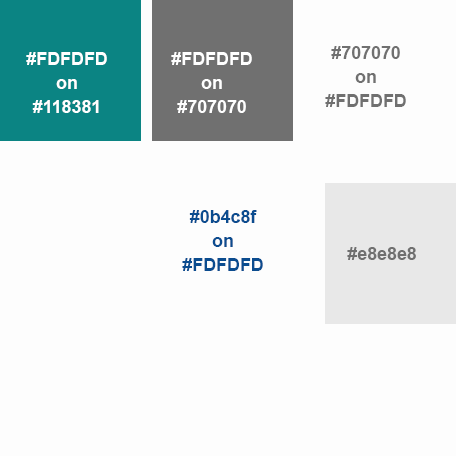
<style>
.page{position:relative;width:456px;height:456px;background:#fdfdfd}
.page>*{position:absolute;margin:0}
.t1{font:18px/24px "Arial-BoldMT";letter-spacing:-0.005em;color:#ffffff}
.t2{font:18px/24px "Arial-BoldMT";letter-spacing:-0.005em;color:#707070}
.t3{font:18px/24px "Arial-BoldMT";letter-spacing:-0.005em;color:#0b4c8f}
.t4{font:18px "Arial-BoldMT";letter-spacing:-0.005em;color:#707070}
</style>
<div class="page">
<p class="t1" style="left:26px;top:52px;width:81px;height:61px;text-align:center">#FDFDFD<br>on<br>#118381</p>
<p class="t1" style="left:171px;top:52px;width:81px;height:61px;text-align:center">#FDFDFD<br>on<br>#707070</p>
<p class="t2" style="left:325px;top:46px;width:81px;height:61px;text-align:center">#707070<br>on<br>#FDFDFD</p>
<p class="t3" style="left:182px;top:210px;width:81px;height:61px;text-align:center">#0b4c8f<br>on<br>#FDFDFD</p>
<p class="t4" style="left:347px;top:247px;width:69px;height:13px">#e8e8e8</p>
</div>
